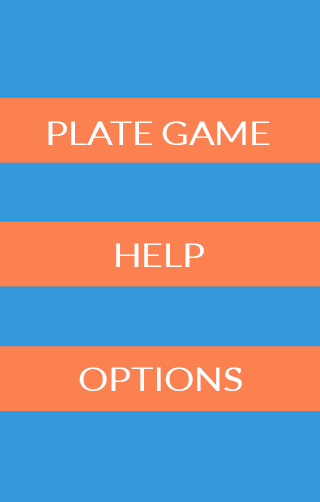
<style>
.page{position:relative;width:320px;height:502px;background:#3498db}
.page>*{position:absolute;margin:0}
.t1{font:32.5px "Lato-Regular";color:#fefefe;scale:1.16 1}
</style>
<div class="page">
<p class="t1" style="left:48px;top:121px;width:222px;height:24px">PLATE GAME</p>
<p class="t1" style="left:116px;top:243px;width:88px;height:24px">HELP</p>
<p class="t1" style="left:79px;top:367px;width:163px;height:24px">OPTIONS</p>
</div>
